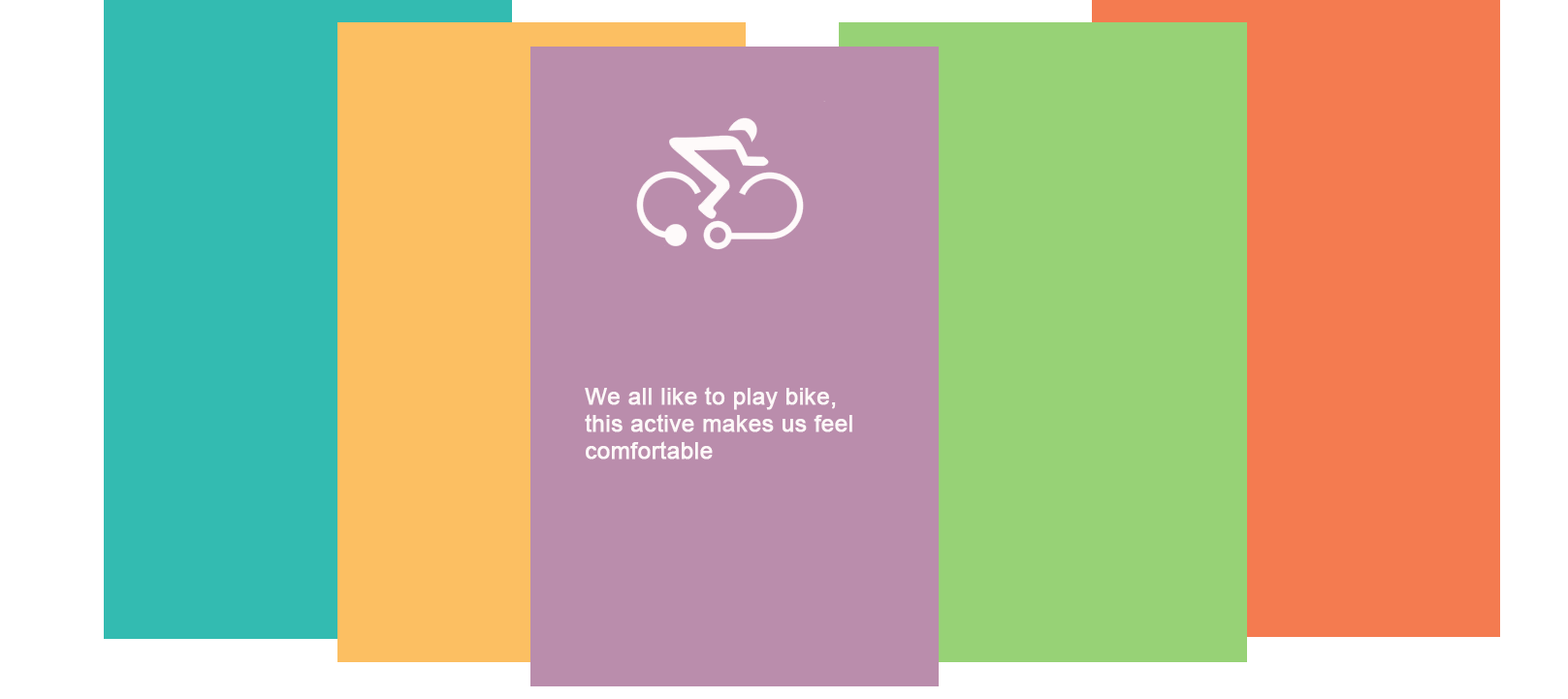
<style>
.page{position:relative;width:1568px;height:699px;background:#ba8dac}
.page>*{position:absolute;margin:0}
.t1{font:23.3px/27.2px "ArialMT";color:#fdf8f8;font-weight:bold}
</style>
<div class="page">
<p class="t1" style="left:585px;top:387px;width:267px;height:73px">We all like to play bike,<br>this active makes us feel<br>comfortable</p>
</div>
